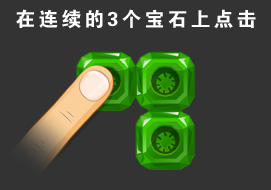
<style>
.page{position:relative;width:271px;height:190px;background:#333333}
.page>*{position:absolute;margin:0}
.t1{font:20px "Jdahei";letter-spacing:0.15em;color:#ffffff}
</style>
<div class="page">
<p class="t1" style="left:16px;top:9px;width:240px;height:20px">在连续的3个宝石上点击</p>
</div>
